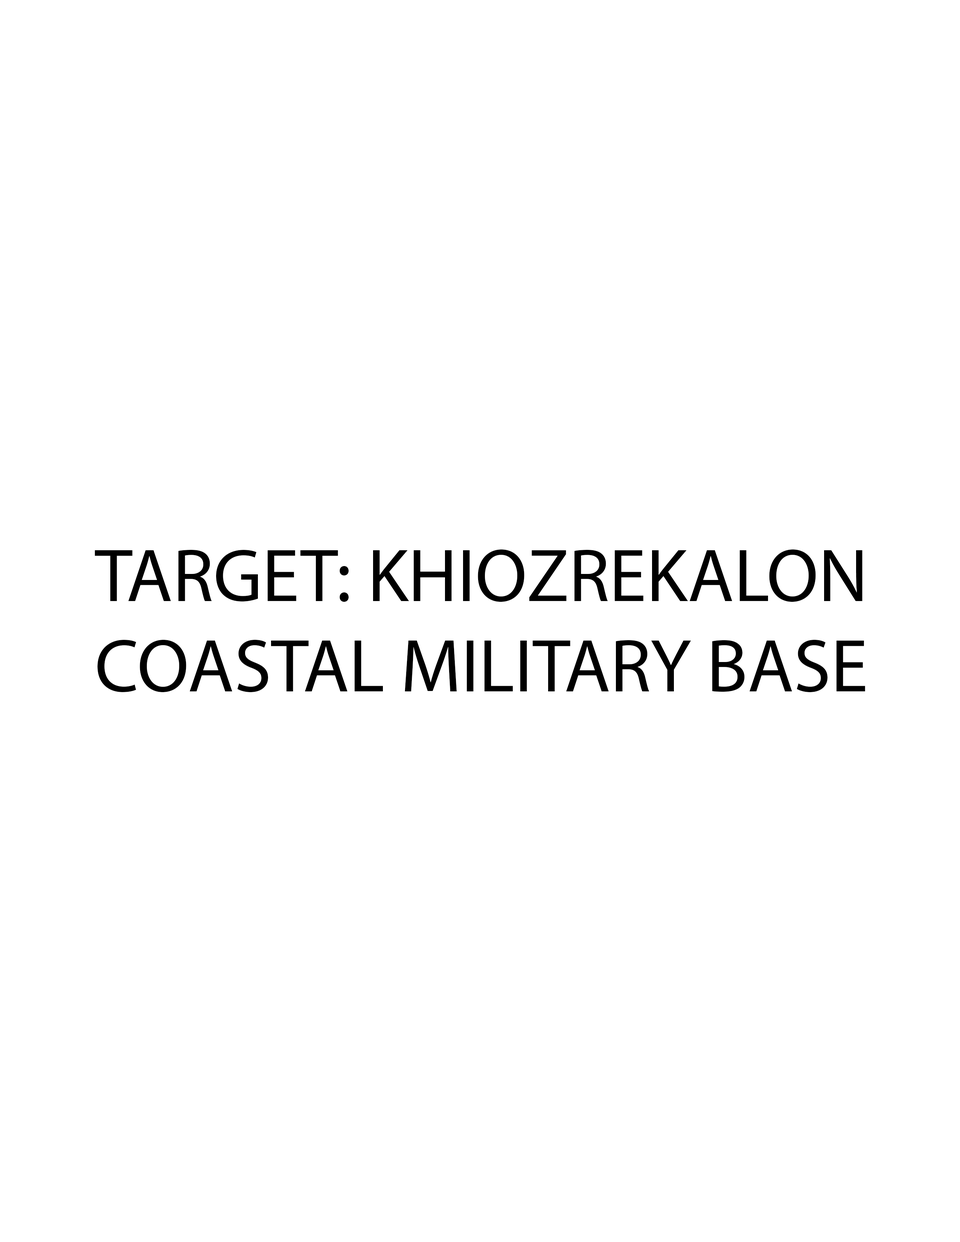
<style>
.page{position:relative;width:960px;height:1242px;background:#ffffff}
.page>*{position:absolute;margin:0}
.t1{font:75.3px "MyriadPro-Regular";color:#000000}
</style>
<div class="page">
<p class="t1" style="left:95px;top:549px;width:770px;height:144px;text-align:center">TARGET: KHIOZREKALON<br>COASTAL MILITARY BASE</p>
</div>
